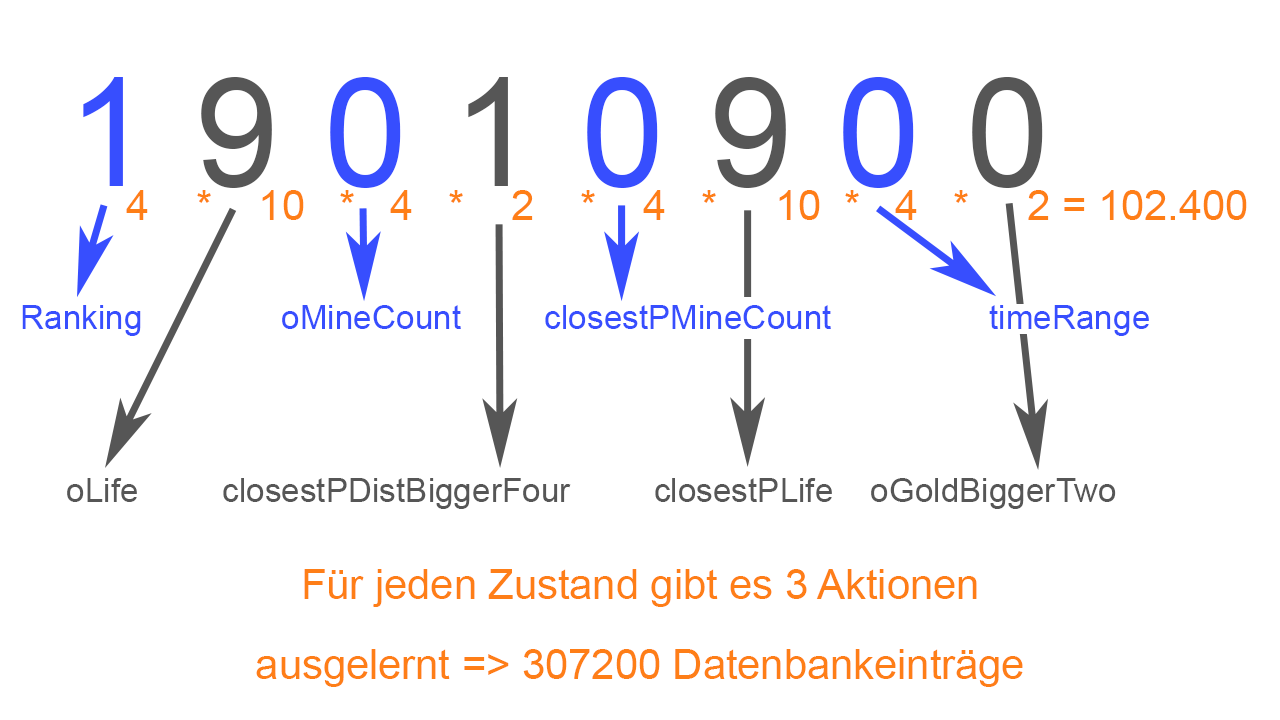
<style>
.page{position:relative;width:1280px;height:720px;background:#ffffff}
.page>*{position:absolute;margin:0}
.t1{font:150px "ArialMT";letter-spacing:0.3em;color:#374efe}
.t2{font:75px "ArialMT";letter-spacing:0.3em;color:#374efe}
.t3{font:150px "ArialMT";letter-spacing:0.3em;color:#565656}
.t4{font:41.7px "ArialMT";color:#fe7e17}
.t5{font:33.3px "ArialMT";color:#374efe}
.t6{font:33.3px "ArialMT";color:#565656}
</style>
<div class="page">
<p class="t1" style="left:83px;top:77px;width:960px;height:111px"><span class="t2"><br></span>1<span class="t3">9</span>0<span class="t3">1</span>0<span class="t3">9</span>0<span class="t3">0</span></p>
<p class="t4" style="left:126px;top:190px;width:1121px;height:30px"><span class="t2"><br></span>                  4    *    10   *   4   *    2    *    4   *     10  *   4   *     2 = 102.400</p>
<p class="t5" style="left:22px;top:305px;width:1127px;height:31px">Ranking               oMineCount         closestPMineCount                 timeRange</p>
<p class="t6" style="left:67px;top:478px;width:1049px;height:31px">oLife         closestPDistBiggerFour         closestPLife    oGoldBiggerTwo</p>
<p class="t4" style="left:256px;top:569px;width:767px;height:118px;text-align:center">Für jeden Zustand gibt es 3 Aktionen<br> <br>ausgelernt =&gt; 307200 Datenbankeinträge</p>
</div>
